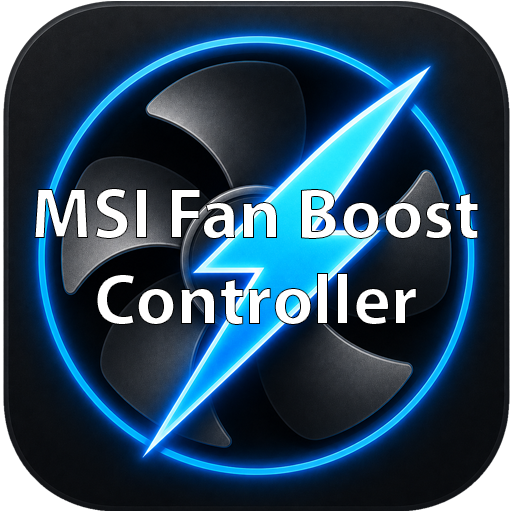
<style>
.page{position:relative;width:512px;height:512px}
.page>*{position:absolute;margin:0}
.t1{font:72px "MyriadPro-Bold";color:#ffffff}
</style>
<div class="page">
<p class="t1" style="left:34px;top:188px;width:445px;height:137px;text-align:center">MSI Fan Boost<br>Controller</p>
</div>
